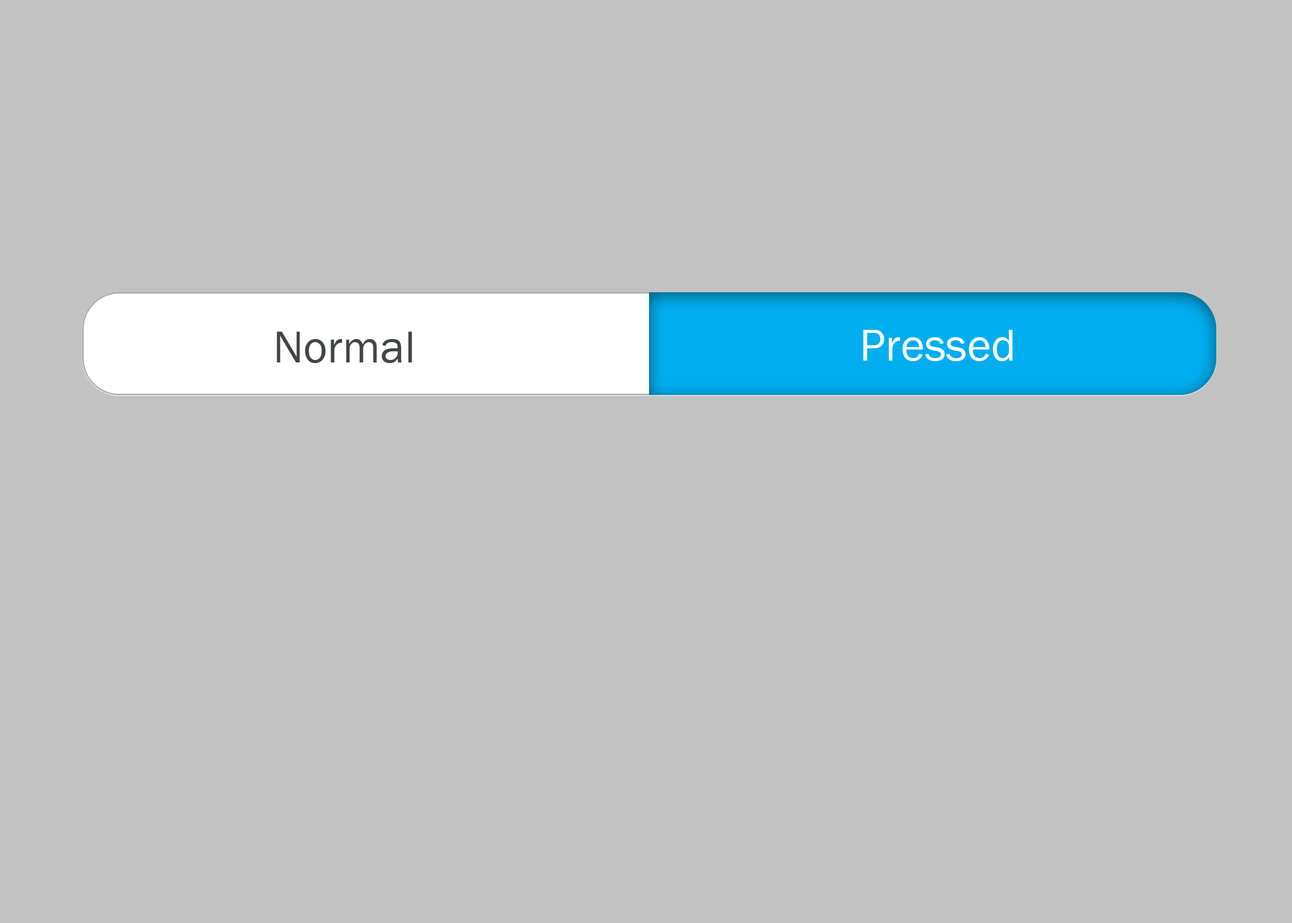
<style>
.page{position:relative;width:1292px;height:923px;background:#c2c2c2}
.page>*{position:absolute;margin:0}
.t1{font:46.1px "FranklinGothic-Book";color:#ffffff}
.t2{font:46.1px "FranklinGothic-Book";color:#424546}
</style>
<div class="page">
<p class="t1" style="left:863px;top:330px;width:150px;height:31px">Pressed</p>
<p class="t2" style="left:277px;top:332px;width:135px;height:31px">Normal</p>
</div>
